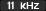
<style>
.page{position:relative;width:46px;height:11px;background:#2f2f2f}
.page>*{position:absolute;margin:0}
.t1{font:12px "PixelFont-7";color:#ffffff}
</style>
<div class="page">
<p class="t1" style="left:7px;top:1px;width:32px;height:9px">11 kHz</p>
</div>
